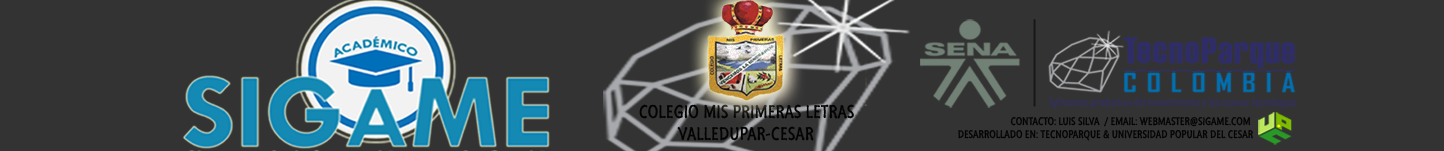
<style>
.page{position:relative;width:1444px;height:151px;background:#333333}
.page>*{position:absolute;margin:0}
.t1{font:18.5px "SegoeMarker";color:#030303}
.t2{font:10.9px "SegoeMarker";color:#030303}
</style>
<div class="page">
<p class="t1" style="left:639px;top:104px;width:215px;height:37px;text-align:center">COLEGIO MIS PRIMERAS LETRAS<br>VALLEDUPAR-CESAR</p>
<p class="t2" style="left:958px;top:117px;width:295px;height:24px;text-align:right">CONTACTO: LUIS SILVA  / EMAIL: WEBMASTER@SIGAME.COM<br>DESARROLLADO EN: TECNOPARQUE &amp; UNIVERSIDAD POPULAR DEL CESAR</p>
</div>
